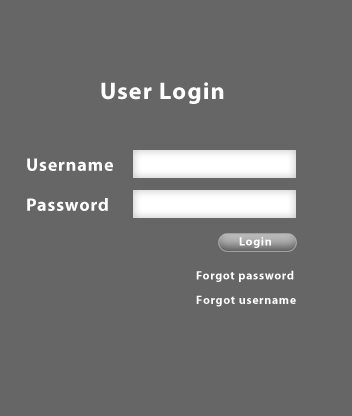
<style>
.page{position:relative;width:352px;height:416px;background:#666666}
.page>*{position:absolute;margin:0}
.t1{font:24px "MyriadPro-Bold";letter-spacing:0.05em;color:#ffffff}
.t2{font:18px "MyriadPro-Bold";letter-spacing:0.05em;color:#ffffff}
.t3{font:12px "MyriadPro-Bold";letter-spacing:0.05em;color:#ffffff}
</style>
<div class="page">
<p class="t1" style="left:101px;top:82px;width:123px;height:22px">User Login</p>
<p class="t2" style="left:27px;top:158px;width:86px;height:13px">Username</p>
<p class="t2" style="left:27px;top:198px;width:81px;height:13px">Password</p>
<p class="t3" style="left:239px;top:237px;width:32px;height:11px">Login</p>
<p class="t3" style="left:196px;top:270px;width:98px;height:12px">Forgot password</p>
<p class="t3" style="left:196px;top:295px;width:100px;height:12px">Forgot username</p>
</div>
